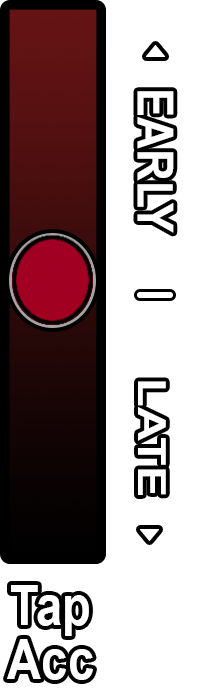
<style>
.page{position:relative;width:200px;height:696px;background:#ffffff}
.page>*{position:absolute;margin:0}
.t1{font:49.6px "Arial-BoldMT";color:#ffffff;scale:0.89 1}
.t2{font:38.6px "Arial-BoldMT";color:#ffffff;scale:1.22 1}
.t3{font:55.1px "Arial-BoldMT";color:#ffffff;scale:0.86 1}
</style>
<div class="page">
<p class="t1" style="left:137px;top:91px;width:37px;height:142px;rotate:90deg">EARLY</p>
<p class="t2" style="left:138px;top:381px;width:28px;height:114px;rotate:90deg">LATE</p>
<p class="t3" style="left:11px;top:585px;width:78px;height:51px">Tap</p>
<p class="t3" style="left:7px;top:639px;width:86px;height:41px">Acc</p>
</div>
